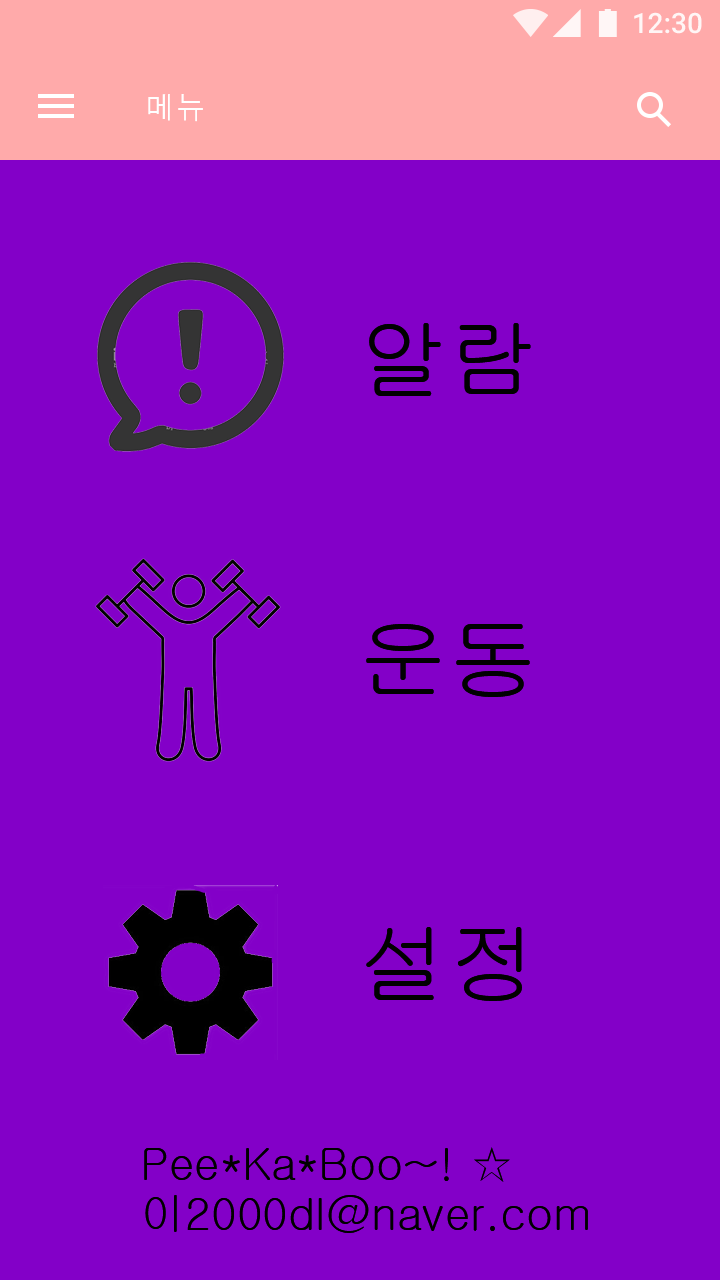
<style>
.page{position:relative;width:720px;height:1280px;background:#8300c8}
.page>*{position:absolute;margin:0}
.t1{font:30px "Dotum";color:#ffffff}
.t2{font:90px "Gulim";color:#010101}
.t3{font:45px/50px "Gulim";color:#000000}
</style>
<div class="page">
<p class="t1" style="left:148px;top:94px;width:55px;height:28px">메뉴</p>
<p class="t2" style="left:369px;top:323px;width:162px;height:73px">알람</p>
<p class="t2" style="left:366px;top:624px;width:164px;height:73px">운동</p>
<p class="t2" style="left:366px;top:927px;width:156px;height:74px">설정</p>
<p class="t3" style="left:144px;top:1147px;width:444px;height:86px">Pee*Ka*Boo~! ☆<br>이2000dl@naver.com</p>
</div>
